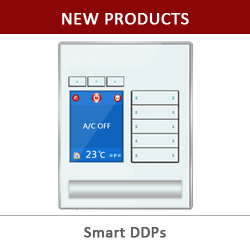
<style>
.page{position:relative;width:250px;height:250px;background:#ffffff}
.page>*{position:absolute;margin:0}
.t1{font:18px "Calibri";letter-spacing:0.01em;color:#ffffff;font-weight:bold}
.t2{font:16px "Calibri";letter-spacing:0.01em;color:#5c5a5a;font-weight:bold}
</style>
<div class="page">
<p class="t1" style="left:62px;top:13px;width:127px;height:12px">NEW PRODUCTS</p>
<p class="t2" style="left:84px;top:227px;width:82px;height:11px">Smart DDPs</p>
</div>
